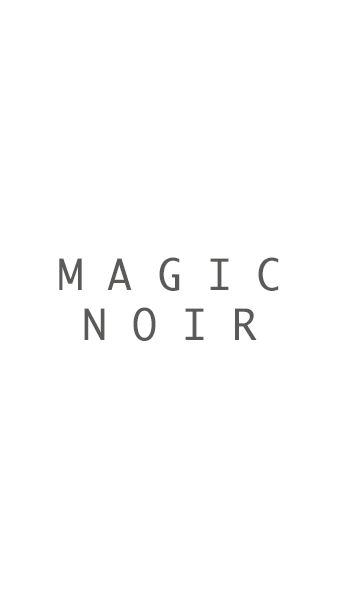
<style>
.page{position:relative;width:338px;height:600px;background:#ffffff}
.page>*{position:absolute;margin:0}
.t1{font:41.7px "Ayuthaya";color:#5c5a59}
</style>
<div class="page">
<p class="t1" style="left:59px;top:257px;width:220px;height:84px;text-align:center">M A G I C<br>N O I R</p>
</div>
